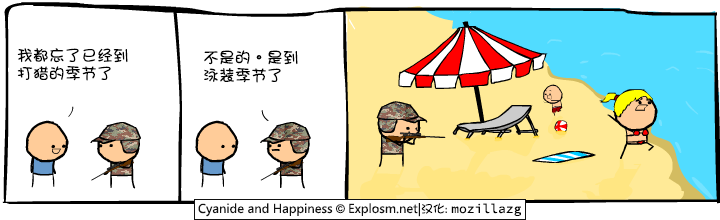
<style>
.page{position:relative;width:720px;height:220px;background:#ffffff}
.page>*{position:absolute;margin:0}
.t1{font:16px/18px "DFGirl";color:#000000}
</style>
<div class="page">
<p class="t1" style="left:17px;top:48px;width:111px;height:33px">我都忘了已经到<br>打猎的季节了</p>
<p class="t1" style="left:204px;top:50px;width:94px;height:33px">不是的。是到<br>泳装季节了</p>
</div>
